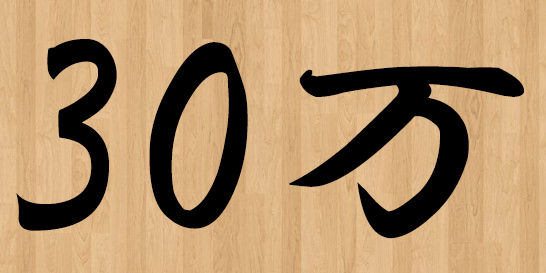
<style>
.page{position:relative;width:546px;height:273px}
.page>*{position:absolute;margin:0}
.t1{font:274.1px "HGPGyoshotai";color:#000000}
</style>
<div class="page">
<p class="t1" style="left:16px;top:39px;width:508px;height:200px">30万</p>
</div>
